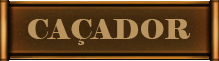
<style>
.page{position:relative;width:219px;height:61px}
.page>*{position:absolute;margin:0}
.t1{font:28px "Elephant-Regular";color:#b9945f}
</style>
<div class="page">
<p class="t1" style="left:28px;top:19px;width:162px;height:26px">CAÇADOR</p>
</div>
